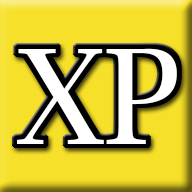
<style>
.page{position:relative;width:192px;height:192px;background:#f6e029}
.page>*{position:absolute;margin:0}
.t1{font:132.5px "LucidaBright";color:#ffffff}
</style>
<div class="page">
<p class="t1" style="left:17px;top:48px;width:160px;height:96px">XP</p>
</div>
